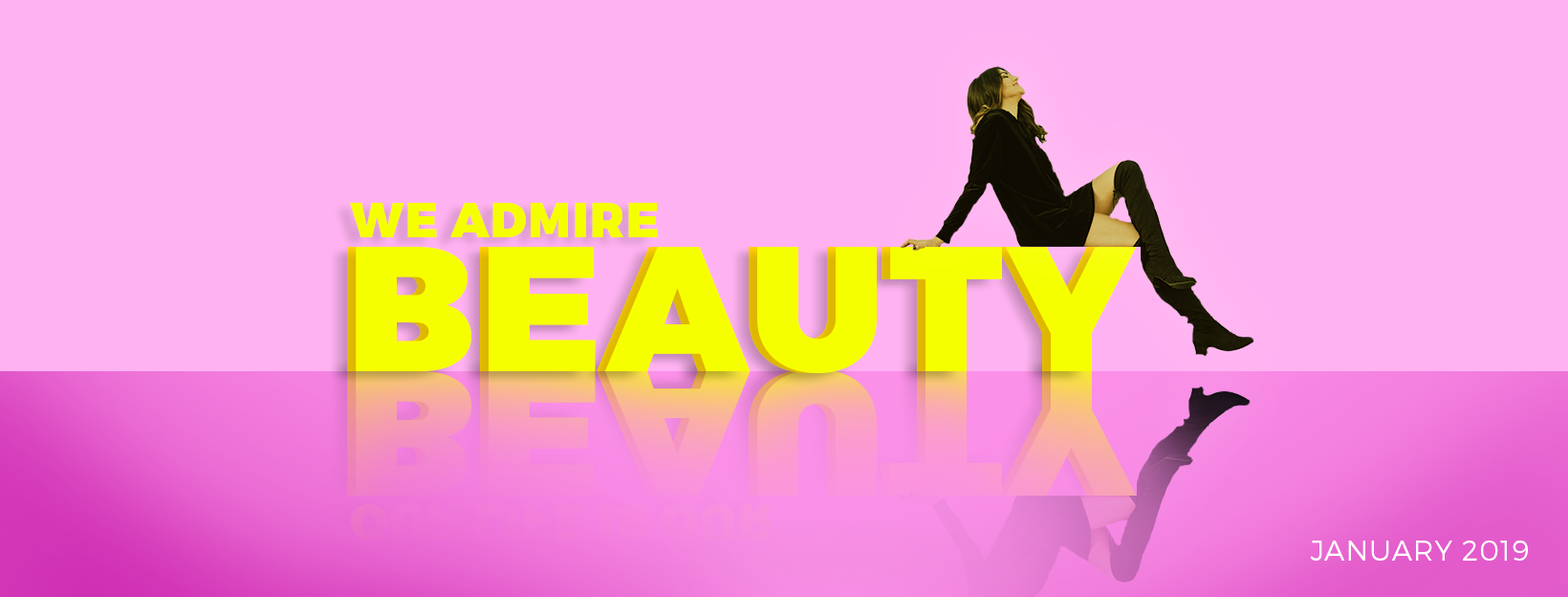
<style>
.page{position:relative;width:1568px;height:597px;background:#ffb2f1}
.page>*{position:absolute;margin:0}
.t1{font:47.8px "Montserrat-Black";letter-spacing:0.03em;color:#f6ff00;text-transform:uppercase}
.t2{font:176.9px "Montserrat-Black";letter-spacing:0.03em;color:#f6ff00;text-transform:uppercase}
.t3{font:28.7px "Montserrat-Light";letter-spacing:0.03em;color:#ffffff;text-transform:uppercase}
</style>
<div class="page">
<p class="t1" style="left:350px;top:203px;width:308px;height:34px">we admire</p>
<p class="t2" style="left:347px;top:246px;width:781px;height:127px">Beauty</p>
<p class="t2" style="left:356px;top:246px;width:781px;height:127px">beauty</p>
<p class="t3" style="left:1310px;top:540px;width:218px;height:20px">January 2019</p>
</div>
